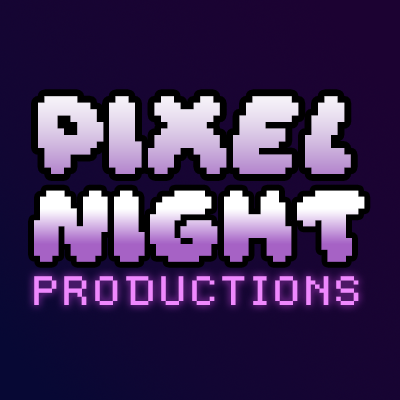
<style>
.page{position:relative;width:400px;height:400px}
.page>*{position:absolute;margin:0}
.t1{font:69.1px "DaydreamRegular"}
.t2{font:63px "DaydreamRegular";scale:1.04 1}
.t3{font:32.8px "Dogica_Pixel";color:#ef88fe;scale:1.07 1}
</style>
<div class="page">
<p class="t1" style="left:38px;top:96px;width:313px;height:78px">Pixel</p>
<p class="t2" style="left:34px;top:190px;width:331px;height:72px">NIGHtT</p>
<p class="t3" style="left:34px;top:276px;width:325px;height:29px">PRODUCTIONS</p>
</div>
